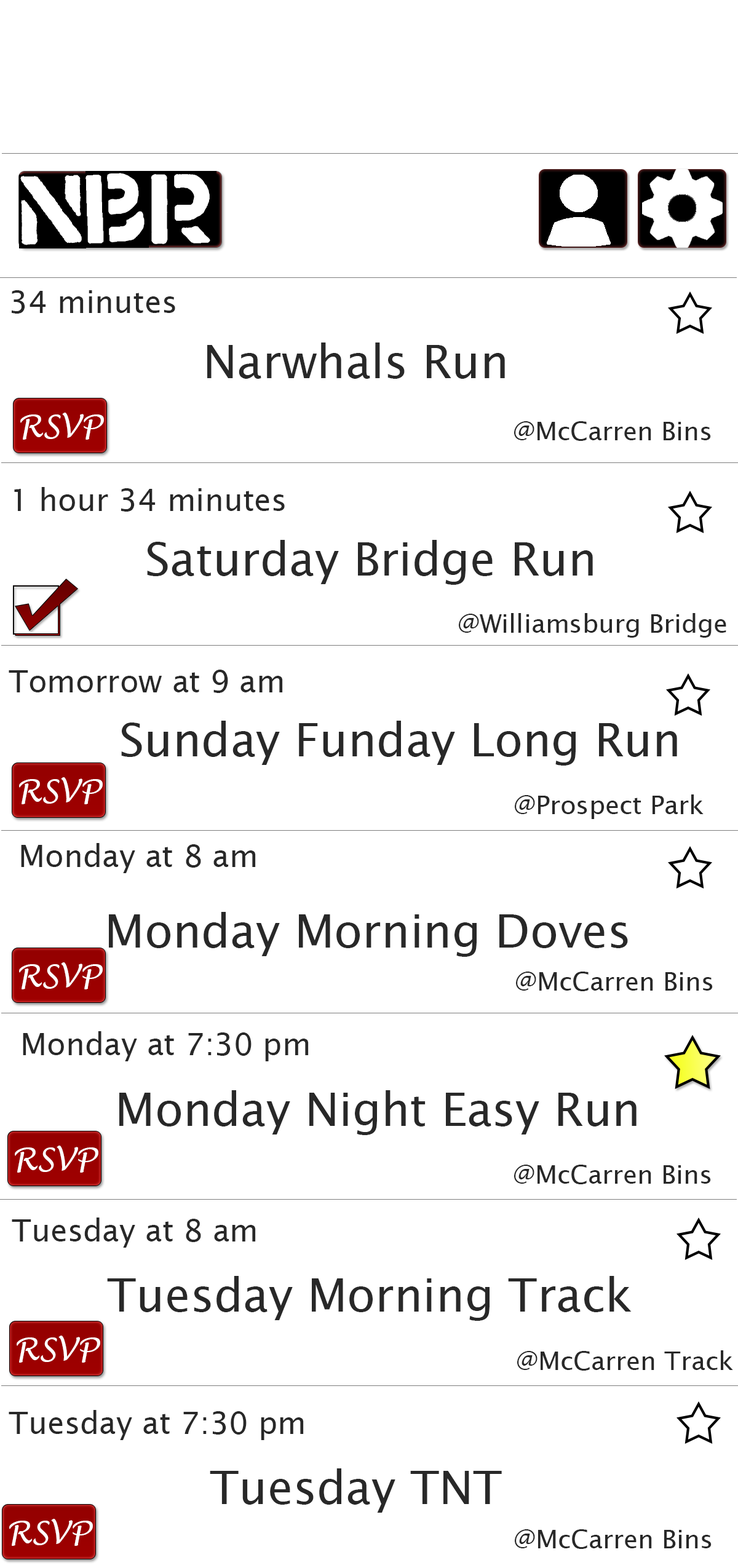
<style>
.page{position:relative;width:738px;height:1568px;background:#ffffff}
.page>*{position:absolute;margin:0}
.t1{font:7.4px "LucidaSans";color:#282828}
.t2{font:46.1px "LucidaSans";color:#282828}
.t3{font:30.7px "LucidaHandwriting-Italic";color:#ffffff}
.t4{font:25.6px "LucidaSans";color:#282828}
</style>
<div class="page">
<p class="t1" style="left:12px;top:290px;width:163px;height:24px">34 minutes</p>
<p class="t2" style="left:207px;top:343px;width:298px;height:36px">Narwhals Run</p>
<p class="t3" style="left:20px;top:413px;width:84px;height:27px">RSVP</p>
<p class="t4" style="left:514px;top:421px;width:197px;height:20px">@McCarren Bins</p>
<p class="t1" style="left:14px;top:487px;width:271px;height:25px">1 hour 34 minutes</p>
<p class="t2" style="left:147px;top:540px;width:446px;height:45px">Saturday Bridge Run</p>
<p class="t4" style="left:459px;top:613px;width:267px;height:25px">@Williamsburg Bridge</p>
<p class="t1" style="left:9px;top:670px;width:274px;height:23px">Tomorrow at 9 am</p>
<p class="t2" style="left:121px;top:721px;width:556px;height:45px">Sunday Funday Long Run</p>
<p class="t3" style="left:19px;top:777px;width:84px;height:27px">RSVP</p>
<p class="t4" style="left:515px;top:794px;width:188px;height:25px">@Prospect Park</p>
<p class="t1" style="left:21px;top:843px;width:235px;height:30px">Monday at 8 am</p>
<p class="t2" style="left:109px;top:912px;width:519px;height:45px">Monday Morning Doves</p>
<p class="t3" style="left:19px;top:962px;width:84px;height:27px">RSVP</p>
<p class="t4" style="left:516px;top:972px;width:197px;height:19px">@McCarren Bins</p>
<p class="t1" style="left:23px;top:1031px;width:286px;height:30px">Monday at 7:30 pm</p>
<p class="t2" style="left:119px;top:1090px;width:517px;height:45px">Monday Night Easy Run</p>
<p class="t3" style="left:15px;top:1146px;width:83px;height:27px">RSVP</p>
<p class="t4" style="left:514px;top:1165px;width:197px;height:19px">@McCarren Bins</p>
<p class="t1" style="left:12px;top:1218px;width:244px;height:30px">Tuesday at 8 am</p>
<p class="t2" style="left:107px;top:1276px;width:525px;height:45px">Tuesday Morning Track</p>
<p class="t3" style="left:17px;top:1336px;width:83px;height:27px">RSVP</p>
<p class="t4" style="left:517px;top:1350px;width:216px;height:21px">@McCarren Track</p>
<p class="t1" style="left:9px;top:1410px;width:295px;height:30px">Tuesday at 7:30 pm</p>
<p class="t2" style="left:210px;top:1468px;width:292px;height:45px">Tuesday TNT</p>
<p class="t3" style="left:9px;top:1519px;width:84px;height:27px">RSVP</p>
<p class="t4" style="left:515px;top:1529px;width:196px;height:20px">@McCarren Bins</p>
</div>
